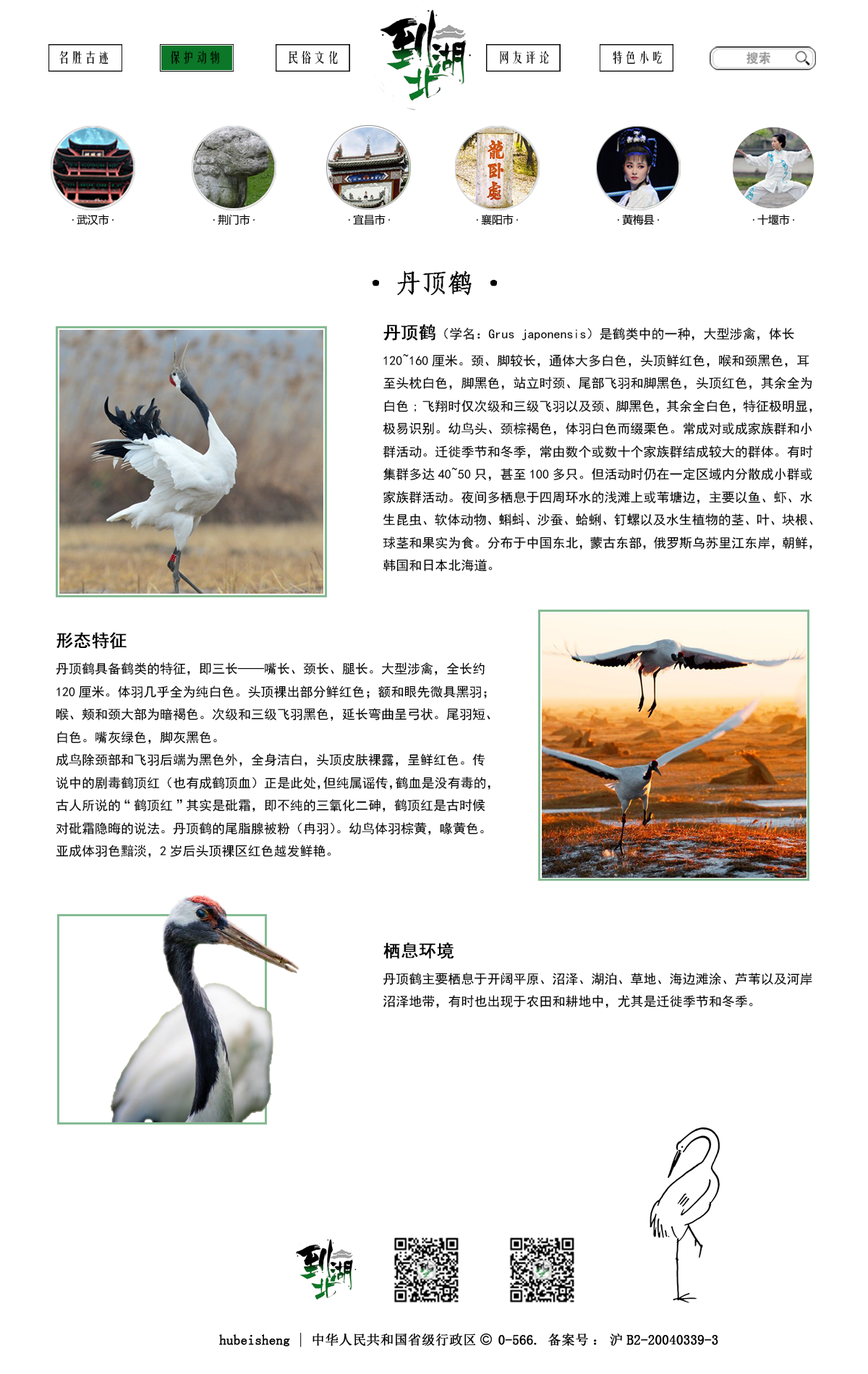
<style>
.page{position:relative;width:868px;height:1374px;background:#ffffff}
.page>*{position:absolute;margin:0}
.t1{font:13.3px "FZYTK--GBK1-0";color:#000000}
.t2{font:26px "·ÂËÎ";color:#000000;font-weight:bold}
.t3{font:13px "SimHei";color:#000000}
.t4{font:17.4px "SimHei";color:#000000;font-weight:bold}
</style>
<div class="page">
<p class="t1" style="left:59px;top:51px;width:49px;height:13px">名胜古迹</p>
<p class="t1" style="left:171px;top:51px;width:48px;height:13px">保护动物</p>
<p class="t1" style="left:289px;top:51px;width:49px;height:13px">民俗文化</p>
<p class="t1" style="left:500px;top:51px;width:49px;height:13px">网友评论</p>
<p class="t1" style="left:613px;top:51px;width:49px;height:13px">特色小吃</p>
<p class="t2" style="left:372px;top:270px;width:125px;height:25px">·丹顶鹤·</p>
<p class="t3" style="left:383px;top:324px;width:430px;height:247px"><span class="t4">丹顶鹤</span>（学名：Grus japonensis）是鹤类中的一种，大型涉禽，体长120~160厘米。颈、脚较长，通体大多白色，头顶鲜红色，喉和颈黑色，耳至头枕白色，脚黑色，站立时颈、尾部飞羽和脚黑色，头顶红色，其余全为白色;飞翔时仅次级和三级飞羽以及颈、脚黑色，其余全白色，特征极明显，极易识别。幼鸟头、颈棕褐色，体羽白色而缀栗色。常成对或成家族群和小群活动。迁徙季节和冬季，常由数个或数十个家族群结成较大的群体。有时集群多达40~50只，甚至100多只。但活动时仍在一定区域内分散成小群或家族群活动。夜间多栖息于四周环水的浅滩上或苇塘边，主要以鱼、虾、水生昆虫、软体动物、蝌蚪、沙蚕、蛤蜊、钉螺以及水生植物的茎、叶、块根、球茎和果实为食。分布于中国东北，蒙古东部，俄罗斯乌苏里江东岸，朝鲜，韩国和日本北海道。</p>
<p class="t3" style="left:56px;top:632px;width:434px;height:226px"><span class="t4">形态特征</span><br>丹顶鹤具备鹤类的特征，即三长——嘴长、颈长、腿长。大型涉禽，全长约120厘米。体羽几乎全为纯白色。头顶裸出部分鲜红色；额和眼先微具黑羽；喉、颊和颈大部为暗褐色。次级和三级飞羽黑色，延长弯曲呈弓状。尾羽短、白色。嘴灰绿色，脚灰黑色。<br>成鸟除颈部和飞羽后端为黑色外，全身洁白，头顶皮肤裸露，呈鲜红色。传说中的剧毒鹤顶红（也有成鹤顶血）正是此处，但纯属谣传，鹤血是没有毒的，<br>古人所说的“鹤顶红”其实是砒霜，即不纯的三氧化二砷，鹤顶红是古时候对砒霜隐晦的说法。丹顶鹤的尾脂腺被粉（冉羽）。幼鸟体羽棕黄，喙黄色。<br>亚成体羽色黯淡，2岁后头顶裸区红色越发鲜艳。</p>
<p class="t3" style="left:383px;top:942px;width:429px;height:66px"><span class="t4">栖息环境<br></span>丹顶鹤主要栖息于开阔平原、沼泽、湖泊、草地、海边滩涂、芦苇以及河岸沼泽地带，有时也出现于农田和耕地中，尤其是迁徙季节和冬季。</p>
</div>
